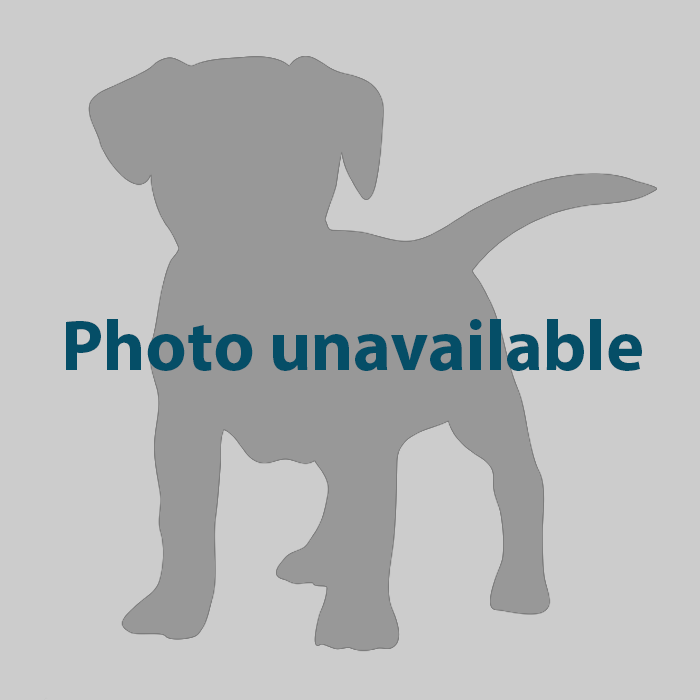
<style>
.page{position:relative;width:700px;height:700px;background:#cccccc}
.page>*{position:absolute;margin:0}
.t1{font:72px "MyriadPro-Bold";color:#054e67}
</style>
<div class="page">
<p class="t1" style="left:66px;top:319px;width:576px;height:52px">Photo unavailable</p>
</div>
